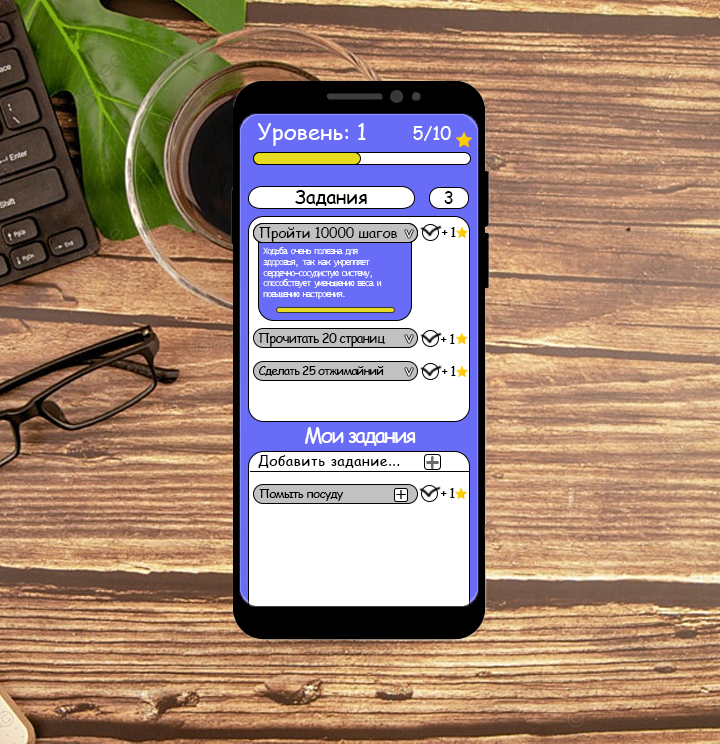
<style>
.page{position:relative;width:720px;height:744px}
.page>*{position:absolute;margin:0}
.t1{font:22.2px "ComicSansMS";color:#ffffff}
.t2{font:17.6px "ComicSansMS";color:#ffffff}
.t3{font:18.6px "ComicSansMS";color:#000000}
.t4{font:17.3px "ComicSansMS";color:#000000}
.t5{font:13.7px "ComicSansMS";color:#000000}
.t6{font:15.9px "CascadiaCodeRoman_317.000wght";letter-spacing:-0.15em;color:#ffffff}
.t7{font:13.1px "ComicSansMS";letter-spacing:-0.07em;color:#000000}
.t8{font:9px "CascadiaCodeRoman_317.000wght";letter-spacing:-0.15em;color:#ffffff}
.t9{font:13.4px "ComicSansMS";letter-spacing:-0.07em;color:#000000}
.t10{font:12.1px "ComicSansMS";letter-spacing:-0.07em;color:#000000}
.t11{font:20.5px "ComicSansMS";letter-spacing:-0.07em;color:#ffffff}
.t12{font:13.6px "ComicSansMS";letter-spacing:0.06em;color:#000000}
.t13{font:29.7px "ComicSansMS";letter-spacing:0.06em;color:#6a6a6a}
.t14{font:12.1px "ComicSansMS";letter-spacing:-0.06em;color:#000000}
.t15{font:24.1px "Candara";color:#000000}
</style>
<div class="page">
<p class="t1" style="left:258px;top:123px;width:108px;height:23px">Уровень: 1</p>
<p class="t2" style="left:413px;top:126px;width:38px;height:15px">5/10</p>
<p class="t3" style="left:295px;top:190px;width:72px;height:16px">Задания</p>
<p class="t4" style="left:444px;top:191px;width:9px;height:13px">3</p>
<p class="t5" style="left:259px;top:227px;width:138px;height:15px">Пройти 10000 шагов</p>
<p class="t6" style="left:405px;top:230px;width:8px;height:8px;rotate:90deg">&gt;</p>
<p class="t7" style="left:442px;top:227px;width:14px;height:10px">+ 1</p>
<p class="t8" style="left:263px;top:247px;width:119px;height:53px">Ходьба очень полезна для <br>здоровья, так как укрепляет <br>сердечно-сосудистую систему, <br>способствует уменьшению веса и <br>повышению настроения.</p>
<p class="t9" style="left:258px;top:333px;width:127px;height:14px">Прочитать 20 страниц</p>
<p class="t6" style="left:405px;top:335px;width:8px;height:8px;rotate:90deg">&gt;</p>
<p class="t7" style="left:441px;top:334px;width:14px;height:10px">+ 1</p>
<p class="t10" style="left:259px;top:366px;width:125px;height:10px">Сделать 25 отжимайний</p>
<p class="t7" style="left:442px;top:366px;width:14px;height:10px">+ 1</p>
<p class="t6" style="left:405px;top:368px;width:8px;height:8px;rotate:90deg">&gt;</p>
<p class="t11" style="left:305px;top:427px;width:111px;height:19px">Мои задания</p>
<p class="t12" style="left:258px;top:455px;width:142px;height:13px">Добавить задание...</p>
<p class="t13" style="left:426px;top:456px;width:13px;height:13px">+</p>
<p class="t14" style="left:259px;top:489px;width:85px;height:12px">Помыть посуду</p>
<p class="t15" style="left:396px;top:490px;width:10px;height:9px">+</p>
<p class="t7" style="left:441px;top:488px;width:14px;height:10px">+ 1</p>
</div>
